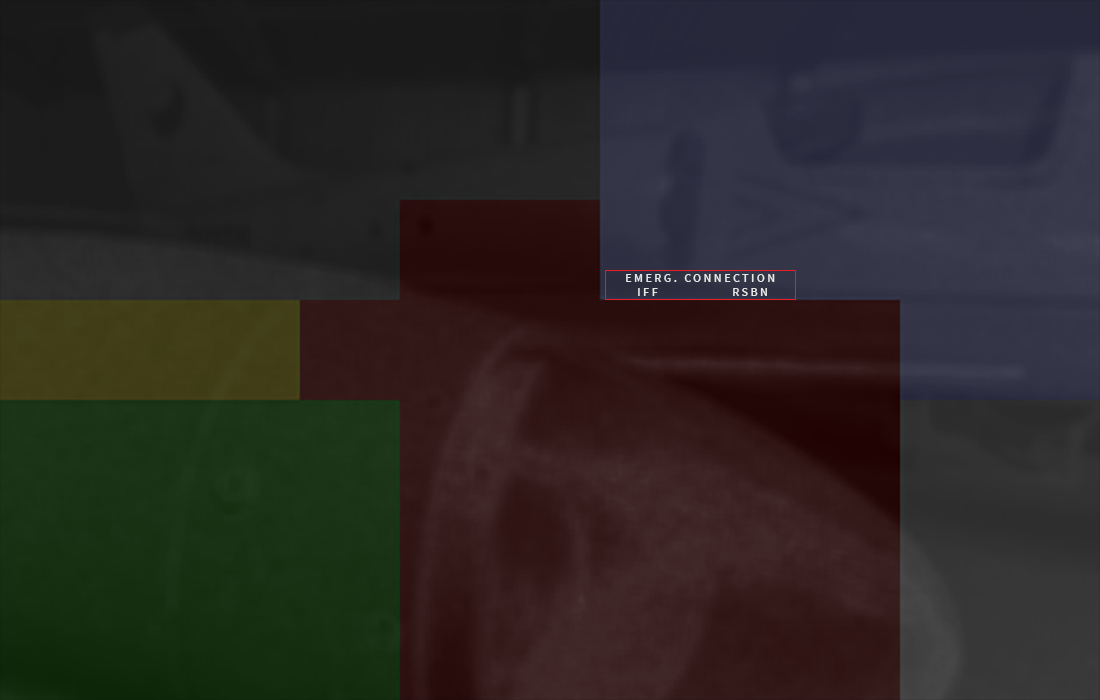
<style>
.page{position:relative;width:1100px;height:700px}
.page>*{position:absolute;margin:0}
.t1{font:12px "SourceSansPro-SemiBold";letter-spacing:0.2em;color:#e6e6e6}
</style>
<div class="page">
<p class="t1" style="left:626px;top:274px;width:149px;height:22px;text-align:center">EMERG. CONNECTION<br> IFF               RSBN</p>
</div>
